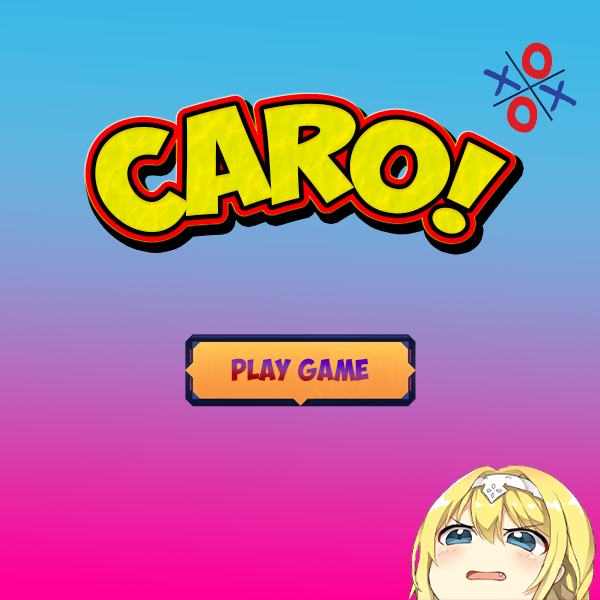
<style>
.page{position:relative;width:600px;height:600px}
.page>*{position:absolute;margin:0}
.t1{font:150px "000ObelixProTB";letter-spacing:-0.02em;color:#e8e500}
.t2{font:33.6px "000ObelixProTB"}
</style>
<div class="page">
<p class="t1" style="left:95px;top:103px;width:411px;height:131px">caro!</p>
<p class="t2" style="left:231px;top:358px;width:138px;height:24px">Play game</p>
</div>
